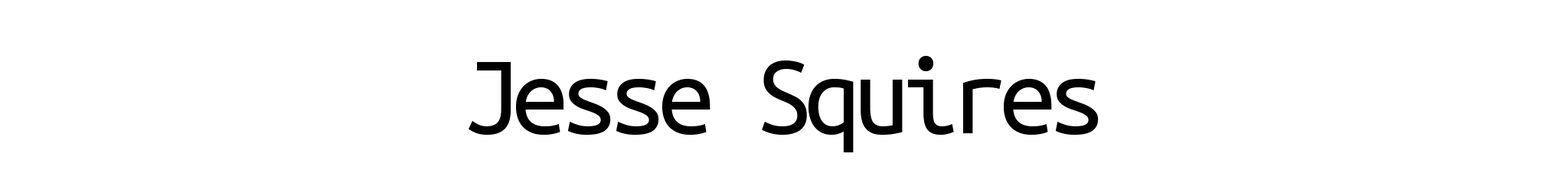
<style>
.page{position:relative;width:1568px;height:196px;background:#ffffff}
.page>*{position:absolute;margin:0}
.t1{font:114.8px "UbuntuMono-Regular";letter-spacing:-0.075em;color:#000000}
</style>
<div class="page">
<p class="t1" style="left:469px;top:56px;width:630px;height:96px">Jesse Squires</p>
</div>
